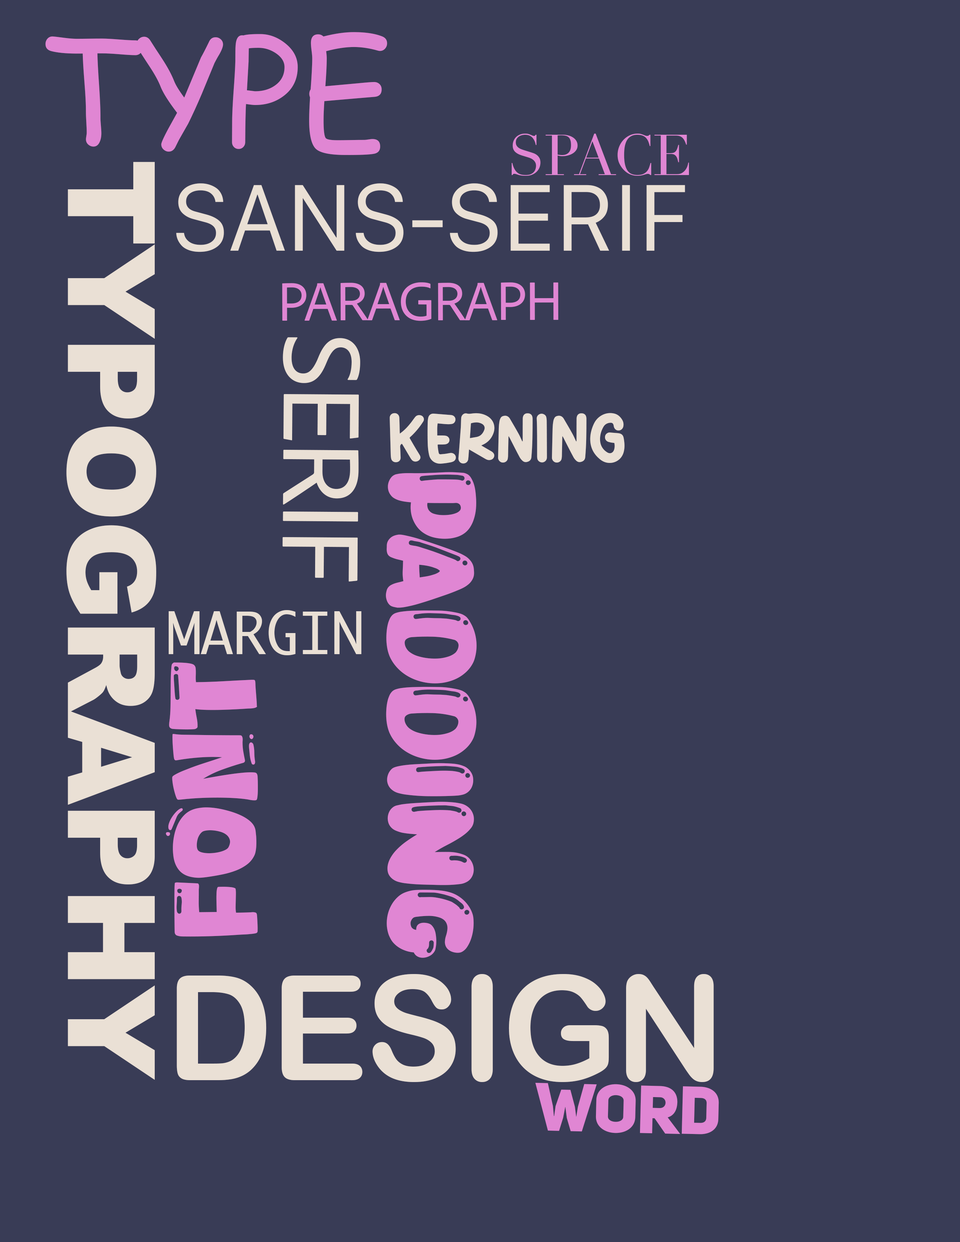
<style>
.page{position:relative;width:960px;height:1242px;background:#393c56}
.page>*{position:absolute;margin:0}
.t1{font:147.7px "ComicSansMS";letter-spacing:-0.02em;color:#e086d3}
.t2{font:56.5px "Didot";letter-spacing:-0.02em;color:#e086d3}
.t3{font:121.2px "Arial-Black";letter-spacing:-0.02em;color:#eae0d5}
.t4{font:90.2px "Galvji";letter-spacing:-0.02em;color:#eae0d5}
.t5{font:56.5px "AdobeClean-Regular";letter-spacing:-0.02em;color:#e086d3}
.t6{font:113.5px "AdobeClean-Regular";letter-spacing:-0.02em;color:#eae0d5}
.t7{font:56.5px "Nice-Sugar";letter-spacing:-0.02em;color:#eae0d5}
.t8{font:117.3px "Copyduck";letter-spacing:-0.02em;color:#e086d3}
.t9{font:56.5px "Ayuthaya";letter-spacing:-0.02em;color:#eae0d5}
.t10{font:113.6px "Coffee-Soda";letter-spacing:-0.02em;color:#e086d3}
.t11{font:145.9px "ArialRoundedMTBold";letter-spacing:-0.02em;color:#eae0d5}
.t12{font:67px "UniSansHeavyCAPS";letter-spacing:-0.02em;color:#e086d3}
</style>
<div class="page">
<p class="t1" style="left:45px;top:32px;width:342px;height:123px">TYPE</p>
<p class="t2" style="left:512px;top:134px;width:177px;height:42px">SPACE</p>
<p class="t3" style="left:66px;top:162px;width:90px;height:918px;rotate:90deg">TYPOGRAPHY</p>
<p class="t4" style="left:176px;top:183px;width:509px;height:69px">SANS-SERIF</p>
<p class="t5" style="left:282px;top:282px;width:276px;height:39px">PARAGRAPH</p>
<p class="t6" style="left:282px;top:337px;width:78px;height:245px;rotate:90deg">SERIF</p>
<p class="t7" style="left:390px;top:413px;width:235px;height:51px">KERNING</p>
<p class="t8" style="left:386px;top:472px;width:91px;height:486px;rotate:90deg">PADDING</p>
<p class="t9" style="left:169px;top:610px;width:192px;height:45px">MARGIN</p>
<p class="t10" style="left:166px;top:663px;width:92px;height:274px;rotate:-90deg">FONT</p>
<p class="t11" style="left:177px;top:974px;width:537px;height:108px">DESIGN</p>
<p class="t12" style="left:535px;top:1083px;width:184px;height:52px;rotate:1deg">WORD</p>
</div>
